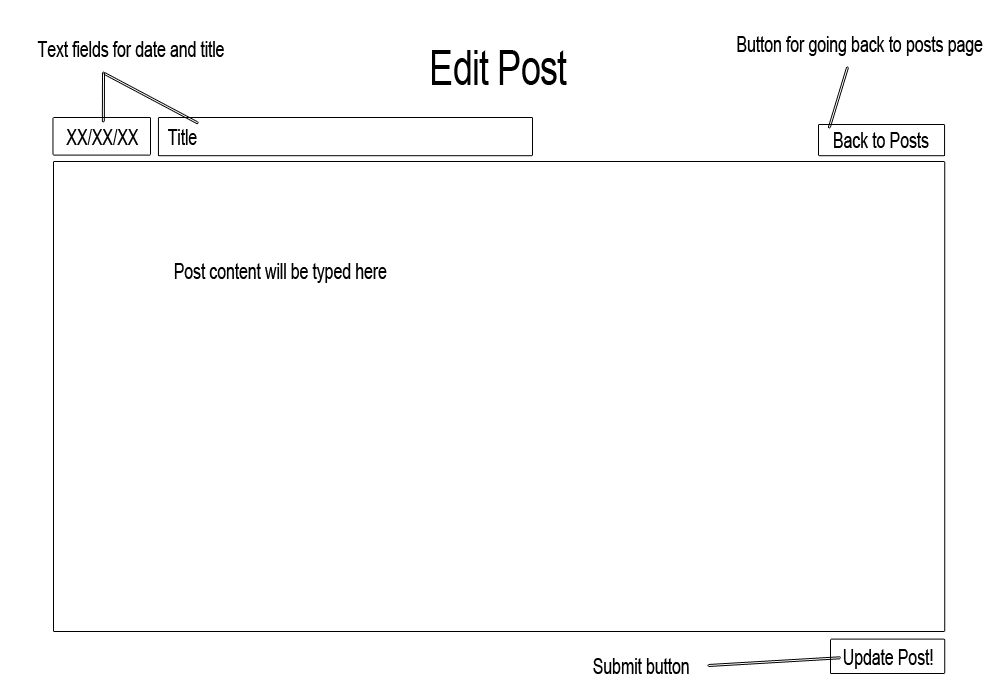
<style>
.page{position:relative;width:1000px;height:700px;background:#ffffff}
.page>*{position:absolute;margin:0}
.t1{font:22.3px "ArialMT";letter-spacing:-0.02em;color:#000000;scale:0.73 1}
.t2{font:48.7px "ArialMT";letter-spacing:-0.02em;color:#000000;scale:0.73 1}
</style>
<div class="page">
<p class="t1" style="left:37px;top:41px;width:187px;height:16px">Text fields for date and title</p>
<p class="t1" style="left:737px;top:36px;width:246px;height:20px">Button for going back to posts page</p>
<p class="t2" style="left:432px;top:50px;width:135px;height:35px">Edit Post</p>
<p class="t1" style="left:66px;top:129px;width:73px;height:16px">XX/XX/XX</p>
<p class="t1" style="left:168px;top:129px;width:29px;height:16px">Title</p>
<p class="t1" style="left:834px;top:132px;width:95px;height:16px">Back to Posts</p>
<p class="t1" style="left:174px;top:263px;width:213px;height:20px">Post content will be typed here</p>
<p class="t1" style="left:843px;top:649px;width:90px;height:20px">Update Post!</p>
<p class="t1" style="left:593px;top:658px;width:96px;height:16px">Submit button</p>
</div>
